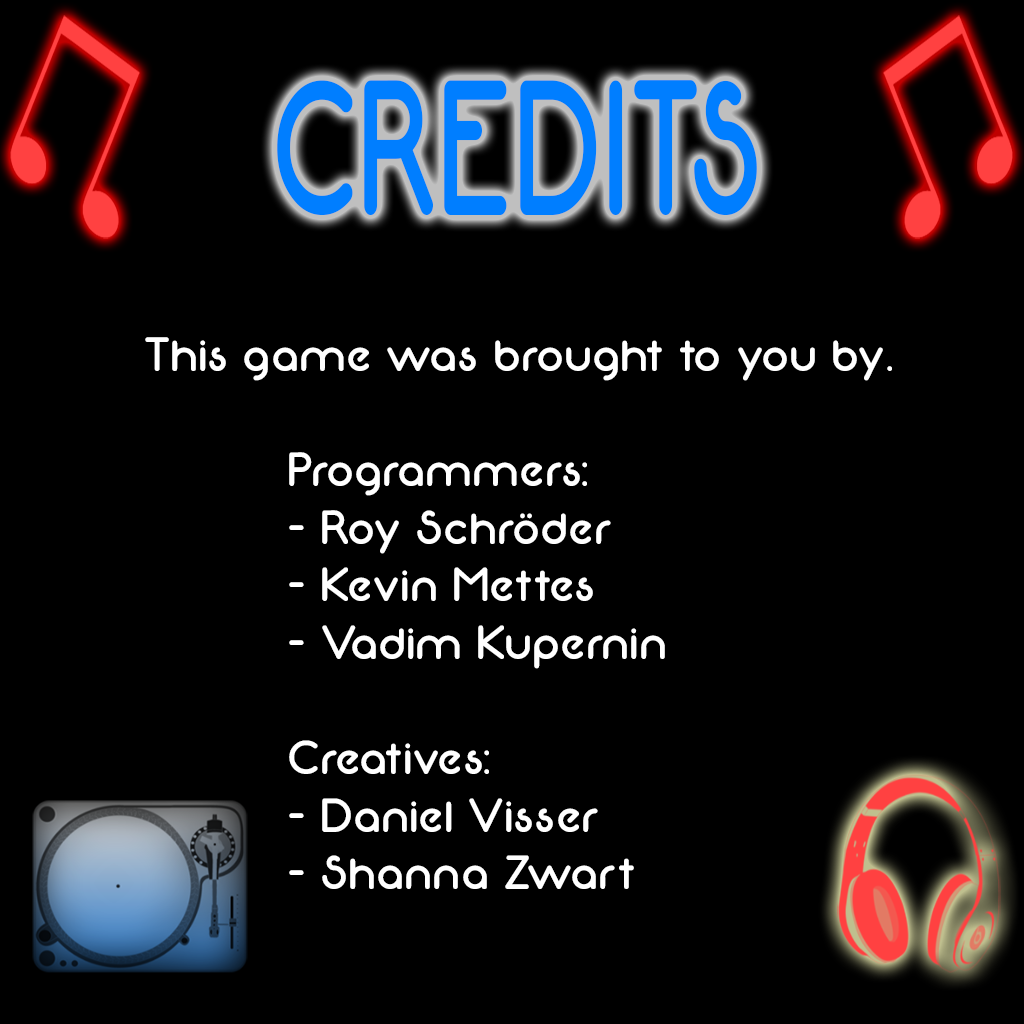
<style>
.page{position:relative;width:1024px;height:1024px;background:#000000}
.page>*{position:absolute;margin:0}
.t1{font:192px "Neon80s";color:#007eff;scale:0.67 1}
.t2{font:48px "Neon80s";color:#ffffff}
</style>
<div class="page">
<p class="t1" style="left:277px;top:80px;width:480px;height:135px">CREDITS</p>
<p class="t2" style="left:145px;top:337px;width:747px;height:552px">This game was brought to you by.<br><br>    Programmers: <br>    - Roy Schröder<br>    - Kevin Mettes<br>    - Vadim Kupernin<br>    <br>    Creatives:<br>    - Daniel Visser<br>    - Shanna Zwart</p>
</div>
